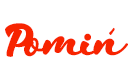
<style>
.page{position:relative;width:133px;height:79px;background:#ffffff}
.page>*{position:absolute;margin:0}
.t1{font:51.2px "Pancake";letter-spacing:-0.1em;color:#f72400}
</style>
<div class="page">
<p class="t1" style="left:5px;top:23px;width:123px;height:34px">Pomiń</p>
</div>
